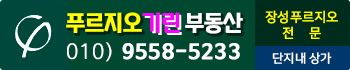
<style>
.page{position:relative;width:350px;height:70px;background:#00482f}
.page>*{position:absolute;margin:0}
.t1{font:23px "NIXGONB-Vb";letter-spacing:-0.075em;color:#ffff00;font-weight:bold}
.t2{font:23px "NIXGONB-Vb";letter-spacing:-0.075em;color:#fc00ff;font-weight:bold}
.t3{font:23px "NIXGONB-Vb";letter-spacing:-0.075em;color:#ffffff;font-weight:bold}
.t4{font:13px "NanumSquareOTFR";color:#ffff00;font-weight:bold}
.t5{font:20px "NanumBarunGothicOTFBold";letter-spacing:0.05em;color:#ffffff;font-weight:bold}
.t6{font:20px "NanumBarunGothicOTFUltraLight";letter-spacing:0.05em;color:#ffffff;font-weight:bold}
.t7{font:12px "NanumSquareOTFR";color:#ffffff;font-weight:bold}
</style>
<div class="page">
<p class="t1" style="left:66px;top:12px;width:76px;height:21px">푸르지오</p>
<p class="t2" style="left:142px;top:12px;width:38px;height:21px">기린</p>
<p class="t3" style="left:185px;top:12px;width:58px;height:22px">부동산</p>
<p class="t4" style="left:265px;top:10px;width:73px;height:29px;text-align:center">장성푸르지오<br>전    문</p>
<p class="t5" style="left:66px;top:42px;width:174px;height:20px"><span class="t6">010)</span> 9558-5233</p>
<p class="t7" style="left:272px;top:52px;width:60px;height:13px">단지내 상가</p>
</div>
